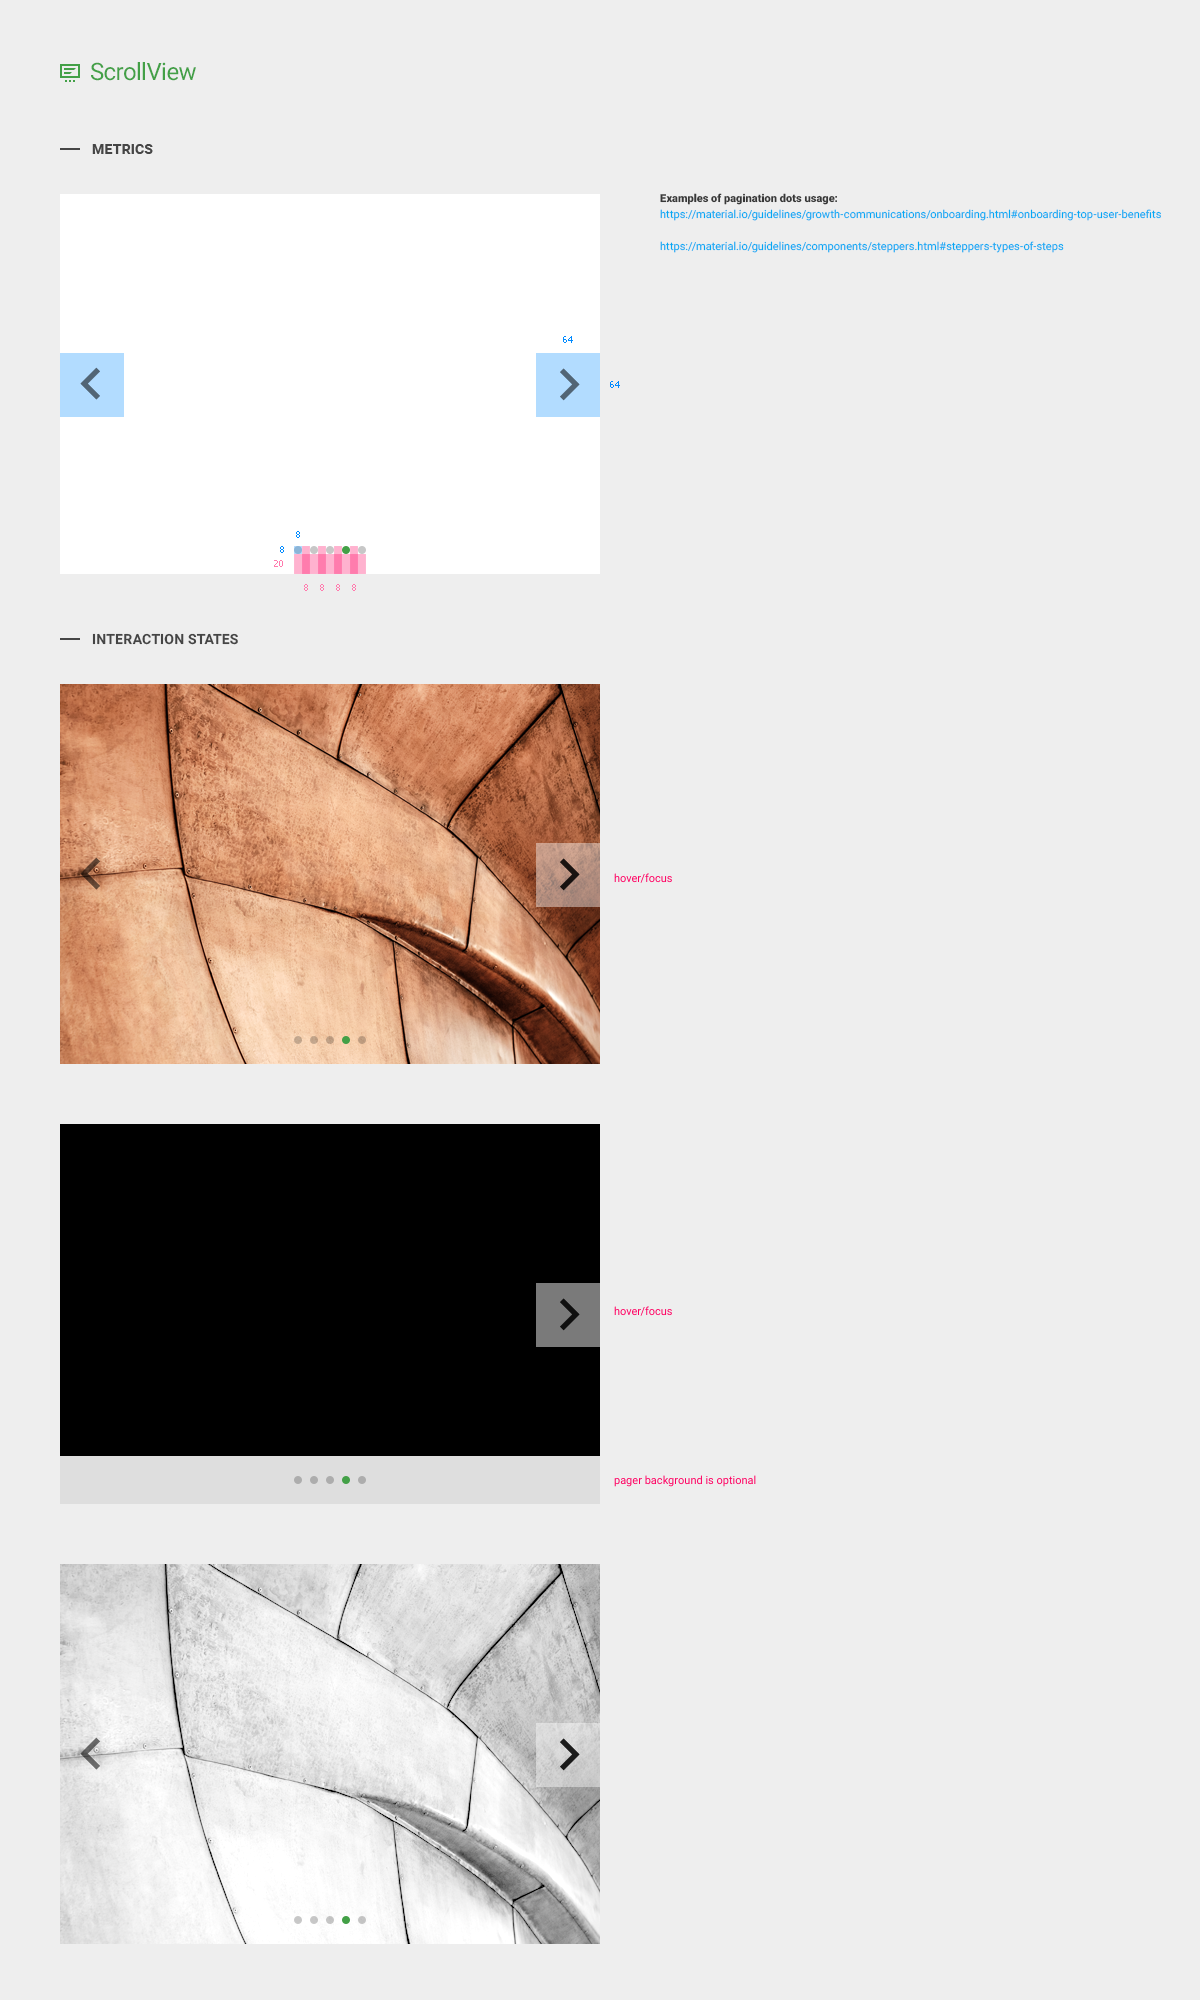
<style>
.page{position:relative;width:1200px;height:2000px;background:#eeeeee}
.page>*{position:absolute;margin:0}
.t1{font:24px "Roboto-Regular";letter-spacing:-0.025em;color:#43a047}
.t2{font:14px "Roboto-Bold";letter-spacing:0.01em;color:#454545;text-transform:uppercase}
.t3{font:11px/16px "Roboto-Regular";color:#03a9f4}
.t4{font:11px/16px "Roboto-Black";color:#383838}
.t5{font:9px "Tahoma";color:#008aff}
.t6{font:9px "Tahoma";color:#ff7cae}
.t7{font:11px "Roboto-Regular";color:#ff0061}
</style>
<div class="page">
<p class="t1" style="left:91px;top:62px;width:105px;height:19px">ScrollView</p>
<p class="t2" style="left:92px;top:144px;width:61px;height:10px">Metrics</p>
<p class="t3" style="left:660px;top:193px;width:501px;height:60px"><span class="t4">Examples of pagination dots usage:<br></span>https://material.io/guidelines/growth-communications/onboarding.html#onboarding-top-user-benefits<br><br>https://material.io/guidelines/components/steppers.html#steppers-types-of-steps</p>
<p class="t5" style="left:563px;top:336px;width:10px;height:7px">64</p>
<p class="t5" style="left:610px;top:381px;width:10px;height:7px">64</p>
<p class="t5" style="left:296px;top:531px;width:4px;height:7px">8</p>
<p class="t5" style="left:280px;top:546px;width:4px;height:7px">8</p>
<p class="t6" style="left:274px;top:560px;width:9px;height:7px">20</p>
<p class="t6" style="left:304px;top:584px;width:4px;height:7px">8</p>
<p class="t6" style="left:320px;top:584px;width:4px;height:7px">8</p>
<p class="t6" style="left:336px;top:584px;width:4px;height:7px">8</p>
<p class="t6" style="left:352px;top:584px;width:4px;height:7px">8</p>
<p class="t2" style="left:92px;top:633px;width:146px;height:12px">Interaction STates</p>
<p class="t7" style="left:614px;top:873px;width:58px;height:10px">hover/focus</p>
<p class="t7" style="left:614px;top:1306px;width:58px;height:10px">hover/focus</p>
<p class="t7" style="left:614px;top:1475px;width:142px;height:12px">pager background is optional</p>
</div>
